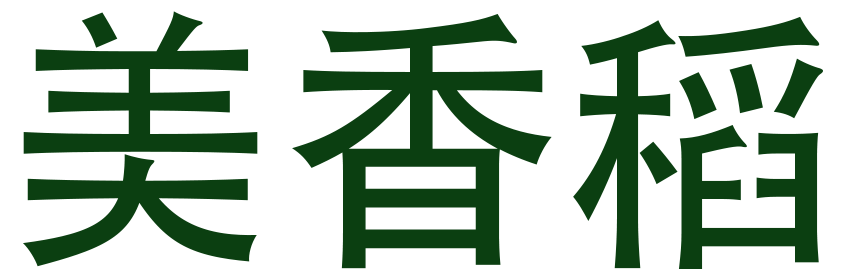
<style>
.page{position:relative;width:843px;height:272px;background:#ffffff}
.page>*{position:absolute;margin:0}
.t1{font:280.8px "AdobeHeitiStd-Regular";color:#0b3f11}
</style>
<div class="page">
<p class="t1" style="left:23px;top:11px;width:800px;height:258px">美香稻</p>
</div>
